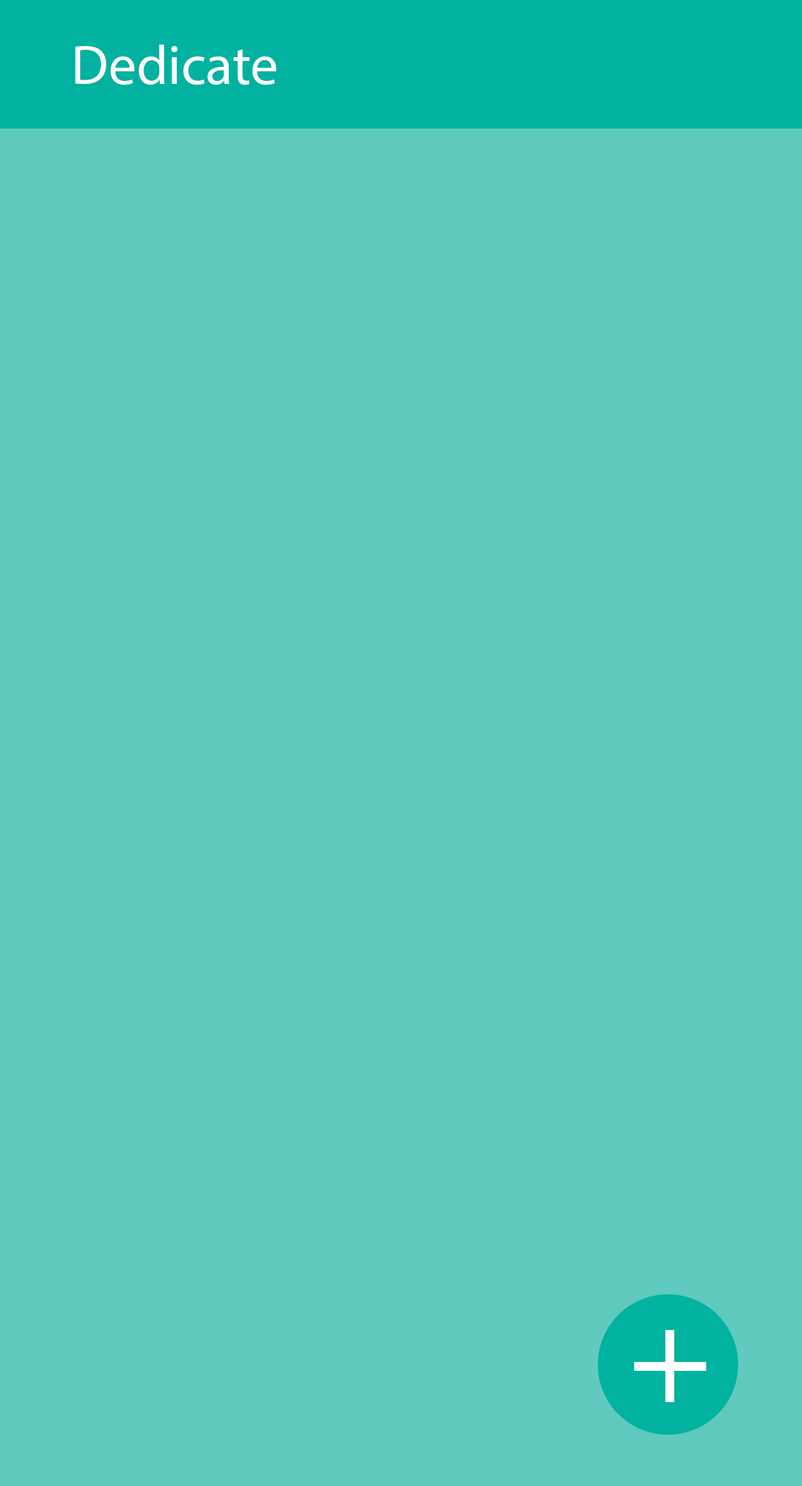
<style>
.page{position:relative;width:802px;height:1486px;background:#61cabf}
.page>*{position:absolute;margin:0}
.t1{font:55.7px "MyriadPro-Regular";color:#ffffff}
</style>
<div class="page">
<p class="t1" style="left:75px;top:45px;width:201px;height:40px">Dedicate</p>
</div>
